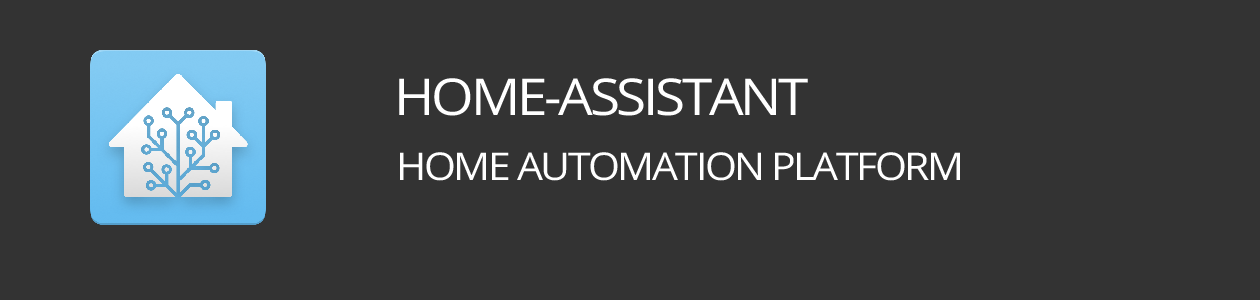
<style>
.page{position:relative;width:1260px;height:300px;background:#333333}
.page>*{position:absolute;margin:0}
.t1{font:50.8px "OpenSansHebrew-Regular";letter-spacing:-0.06em;color:#ffffff;text-transform:uppercase;scale:1.08 1}
.t2{font:38.1px "OpenSansHebrew-Regular";letter-spacing:-0.06em;color:#ffffff;text-transform:uppercase;scale:1.08 1}
</style>
<div class="page">
<p class="t1" style="left:399px;top:78px;width:409px;height:38px">home-assistant</p>
<p class="t2" style="left:400px;top:152px;width:560px;height:29px">home automation platform</p>
</div>
